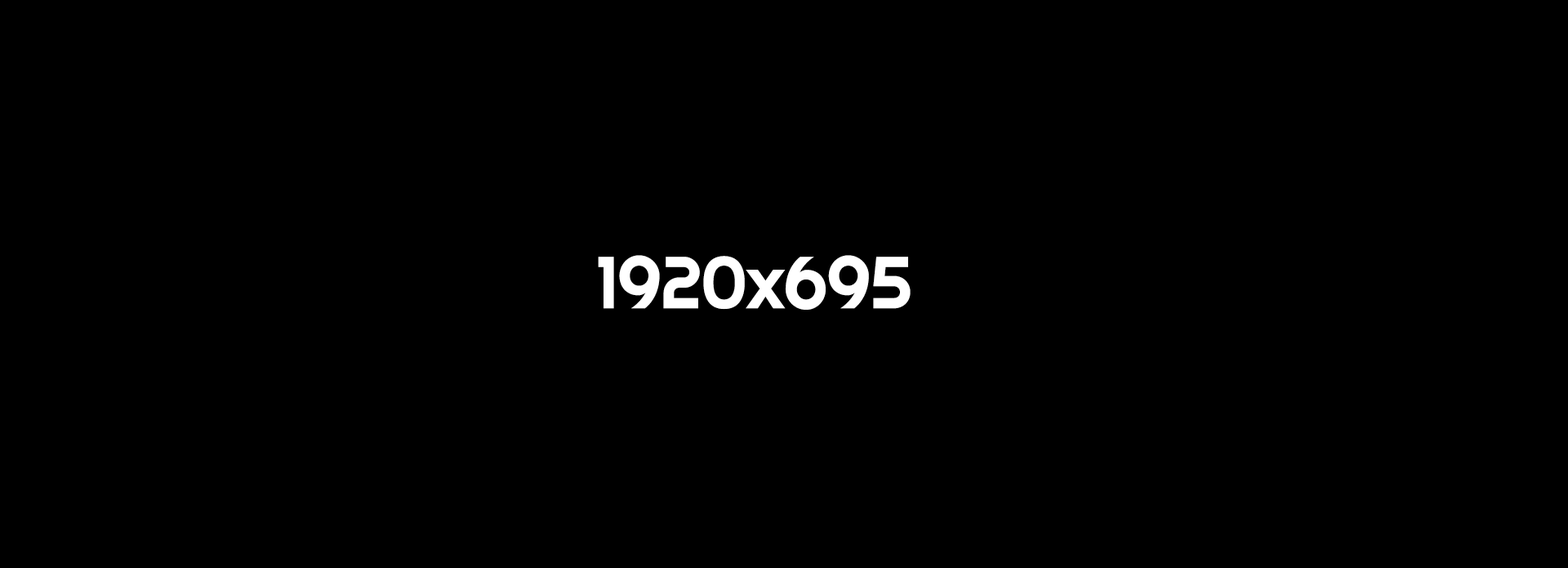
<style>
.page{position:relative;width:1568px;height:568px;background:#000000}
.page>*{position:absolute;margin:0}
.t1{font:73.5px "Righteous-Regular";letter-spacing:-0.025em;color:#ffffff}
</style>
<div class="page">
<p class="t1" style="left:598px;top:255px;width:313px;height:55px">1920x695</p>
</div>
